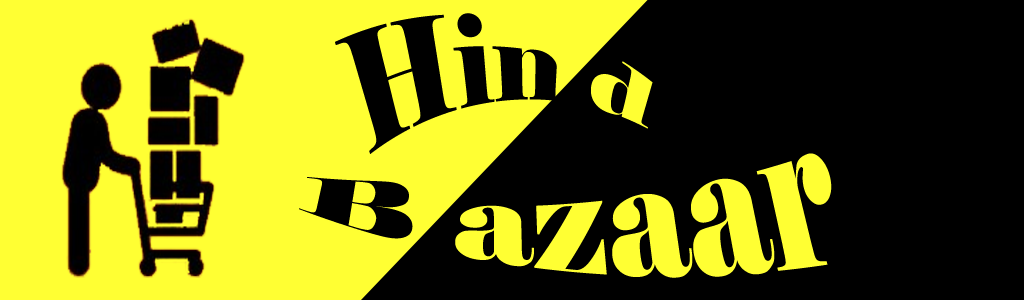
<style>
.page{position:relative;width:1024px;height:300px;background:#000000}
.page>*{position:absolute;margin:0}
.t1{font:104px "Elephant-Regular";color:#000000}
.t2{font:104px "Elephant-Regular";color:#ffff33}
.t3{font:137px "Elephant-Regular";color:#ffff33}
.t4{font:137px "Elephant-Regular";color:#000000}
</style>
<div class="page">
<p class="t1" style="left:335px;top:13px;width:318px;height:141px">Hin <span class="t2">d</span></p>
<p class="t3" style="left:299px;top:153px;width:533px;height:125px"><span class="t4">B </span>azaar</p>
</div>
